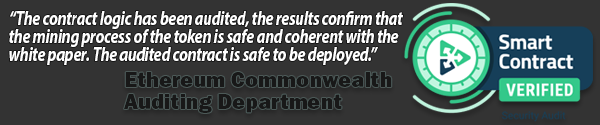
<style>
.page{position:relative;width:600px;height:125px;background:#333333}
.page>*{position:absolute;margin:0}
.t1{font:19.7px/18px "MyriadPro-BoldIt";letter-spacing:-0.02em;color:#ffffff;scale:0.8 1}
.t2{font:21.2px/22px "FranklinGothicURW-Hea";color:#1c1c1c;scale:1.05 1}
</style>
<div class="page">
<p class="t1" style="left:9px;top:11px;width:394px;height:54px">“The contract logic has been audited, the results confirm that <br>the mining process of the token is safe and coherent with the<br>white paper. The audited contract is safe to be deployed.”</p>
<p class="t2" style="left:124px;top:72px;width:268px;height:41px">Ethereum Commonwealth<br>Auditing Department</p>
</div>
